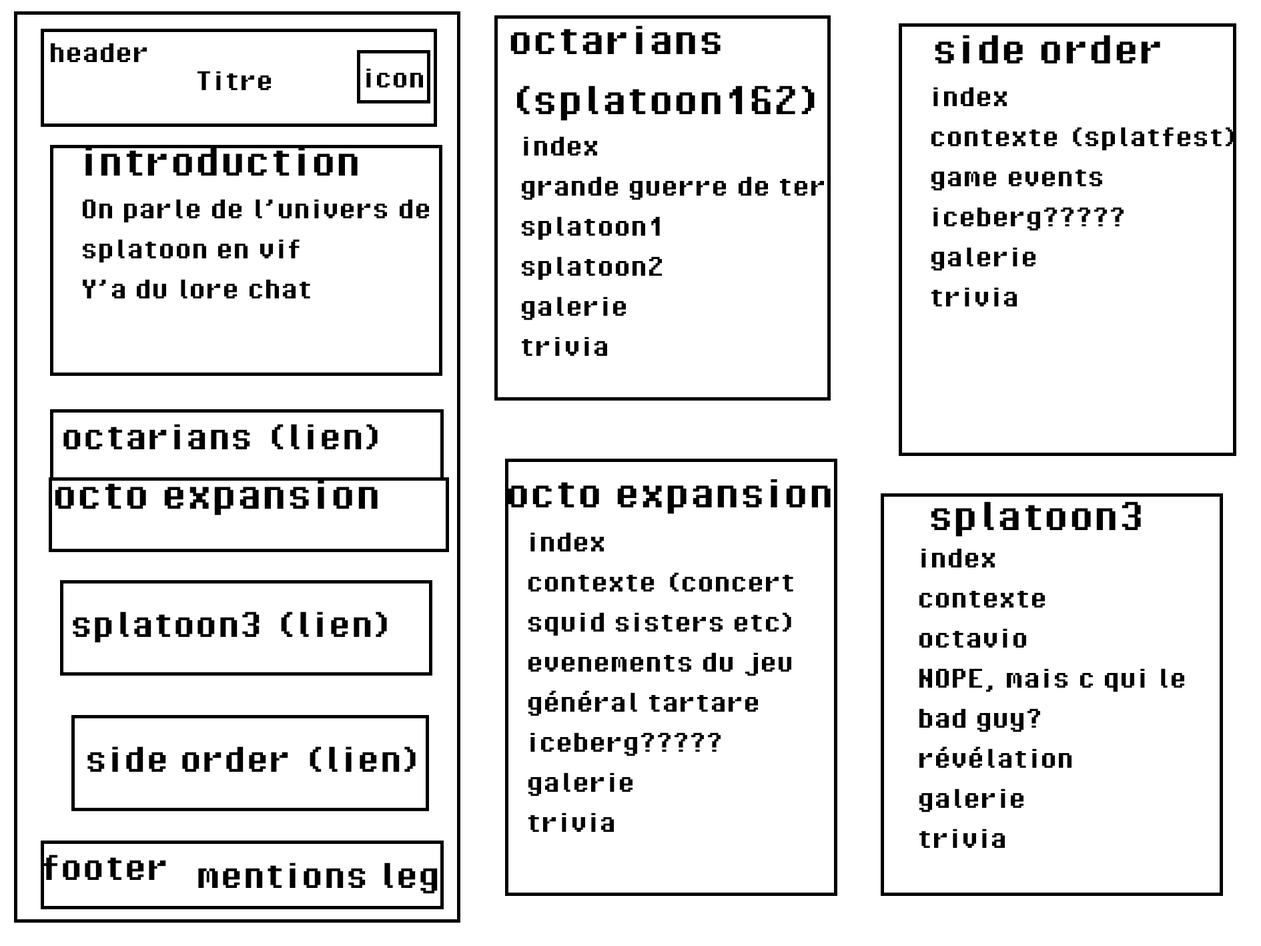
<style>
.page{position:relative;width:1261px;height:946px;background:#ffffff}
.page>*{position:absolute;margin:0}
.t1{font:50px "PixelOperator-Bold";color:#000000}
.t2{font:33.4px "PixelOperator-Bold";color:#000000}
.t3{font:44.5px "PixelOperator-Bold";color:#000000}
</style>
<div class="page">
<p class="t1" style="left:510px;top:25px;width:305px;height:96px">octarians<br>(splatoon1&amp;2)</p>
<p class="t1" style="left:935px;top:35px;width:225px;height:28px">side order</p>
<p class="t2" style="left:51px;top:43px;width:96px;height:19px">header</p>
<p class="t2" style="left:198px;top:71px;width:73px;height:19px">Titre</p>
<p class="t2" style="left:366px;top:68px;width:57px;height:19px">icon</p>
<p class="t2" style="left:932px;top:87px;width:302px;height:219px">index<br>contexte (splatfest)<br>game events<br>iceberg?????<br>galerie<br>trivia</p>
<p class="t2" style="left:522px;top:136px;width:302px;height:220px">index<br>grande guerre de ter<br>splatoon1<br>splatoon2<br>galerie<br>trivia</p>
<p class="t1" style="left:85px;top:147px;width:273px;height:28px">introduction</p>
<p class="t2" style="left:83px;top:199px;width:346px;height:99px">On parle de l’univers de<br>splatoon en vif<br>Y’a du lore chat</p>
<p class="t3" style="left:63px;top:424px;width:315px;height:25px">octarians (lien)</p>
<p class="t1" style="left:55px;top:480px;width:323px;height:35px">octo expansion (lien<br>(</p>
<p class="t1" style="left:508px;top:478px;width:323px;height:36px">octo expansion</p>
<p class="t1" style="left:931px;top:501px;width:210px;height:35px">splatoon3</p>
<p class="t2" style="left:528px;top:532px;width:265px;height:299px">index<br>contexte (concert<br>squid sisters etc)<br>evenements du jeu<br>général tartare<br>iceberg?????<br>galerie<br>trivia</p>
<p class="t2" style="left:919px;top:548px;width:265px;height:299px">index<br>contexte<br>octavio<br>NOPE, mais c qui le<br>bad guy?<br>révélation<br>galerie<br>trivia</p>
<p class="t3" style="left:73px;top:611px;width:314px;height:32px">splatoon3 (lien)</p>
<p class="t3" style="left:87px;top:746px;width:329px;height:25px">side order (lien)</p>
<p class="t3" style="left:43px;top:854px;width:123px;height:25px">footer</p>
<p class="t3" style="left:198px;top:862px;width:240px;height:31px">mentions leg</p>
</div>
